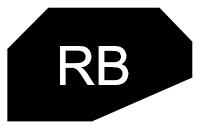
<style>
.page{position:relative;width:200px;height:129px;background:#000000}
.page>*{position:absolute;margin:0}
.t1{font:54.1px "ArialMT";color:#ffffff}
</style>
<div class="page">
<p class="t1" style="left:60px;top:46px;width:69px;height:39px">RB</p>
</div>
